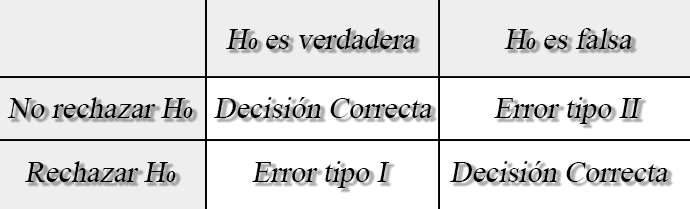
<style>
.page{position:relative;width:690px;height:209px;background:#eeeeee}
.page>*{position:absolute;margin:0}
.t1{font:22.5px "TimesNewRomanPSMT";color:#000000;font-style:italic}
</style>
<div class="page">
<p class="t1" style="left:226px;top:28px;width:190px;height:21px">H₀ es verdadera</p>
<p class="t1" style="left:504px;top:28px;width:128px;height:21px">H₀ es falsa</p>
<p class="t1" style="left:7px;top:97px;width:186px;height:22px">No rechazar H₀</p>
<p class="t1" style="left:214px;top:97px;width:218px;height:21px">Decisión Correcta</p>
<p class="t1" style="left:494px;top:97px;width:148px;height:27px">Error tipo II</p>
<p class="t1" style="left:25px;top:161px;width:151px;height:21px">Rechazar H₀</p>
<p class="t1" style="left:252px;top:161px;width:138px;height:27px">Error tipo I</p>
<p class="t1" style="left:450px;top:161px;width:218px;height:21px">Decisión Correcta</p>
</div>
